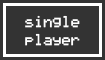
<style>
.page{position:relative;width:105px;height:60px;background:#333333}
.page>*{position:absolute;margin:0}
.t1{font:15px "LCDSolid";color:#ffffff}
</style>
<div class="page">
<p class="t1" style="left:25px;top:15px;width:55px;height:31px;text-align:center">single<br>player</p>
</div>
